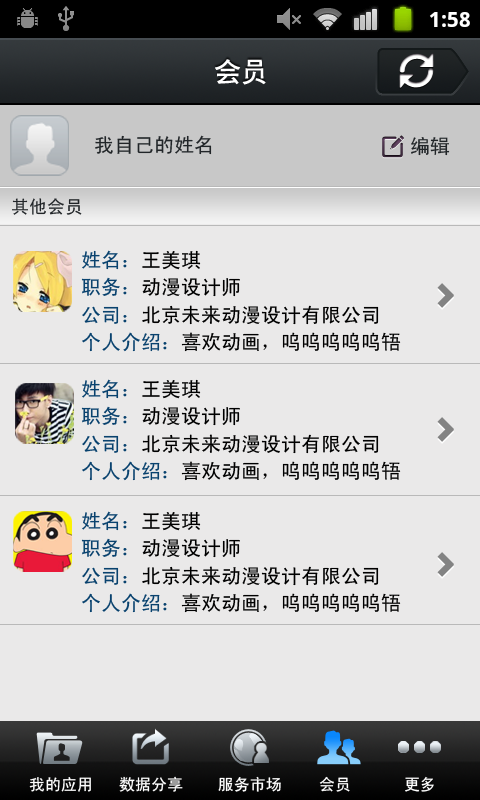
<style>
.page{position:relative;width:480px;height:800px;background:#eae9e9}
.page>*{position:absolute;margin:0}
.t1{font:27px "CTCuHeiSJ";color:#ffffff}
.t2{font:20px "SimHei";color:#212528}
.t3{font:18px "SimHei";color:#212528}
.t4{font:20px "SimHei";color:#09426e}
.t5{font:20px "SimHei";color:#000000}
.t6{font:16px "SimHei";color:#ffffff}
</style>
<div class="page">
<p class="t1" style="left:215px;top:59px;width:51px;height:26px">会员</p>
<p class="t2" style="left:95px;top:135px;width:117px;height:20px">我自己的姓名</p>
<p class="t2" style="left:411px;top:137px;width:39px;height:19px">编辑</p>
<p class="t3" style="left:12px;top:198px;width:70px;height:17px">其他会员</p>
<p class="t4" style="left:82px;top:250px;width:119px;height:20px">姓名：<span class="t5">王美琪</span></p>
<p class="t5" style="left:81px;top:277px;width:159px;height:20px"><span class="t4">职务：</span>动漫设计师</p>
<p class="t5" style="left:82px;top:305px;width:297px;height:20px"><span class="t4">公司：</span>北京未来动漫设计有限公司</p>
<p class="t5" style="left:82px;top:332px;width:319px;height:20px"><span class="t4">个人介绍：</span>喜欢动画，呜呜呜呜呜啎</p>
<p class="t4" style="left:82px;top:379px;width:119px;height:20px">姓名：<span class="t5">王美琪</span></p>
<p class="t5" style="left:81px;top:406px;width:159px;height:20px"><span class="t4">职务：</span>动漫设计师</p>
<p class="t5" style="left:82px;top:434px;width:297px;height:20px"><span class="t4">公司：</span>北京未来动漫设计有限公司</p>
<p class="t5" style="left:82px;top:461px;width:319px;height:20px"><span class="t4">个人介绍：</span>喜欢动画，呜呜呜呜呜啎</p>
<p class="t4" style="left:82px;top:511px;width:119px;height:20px">姓名：<span class="t5">王美琪</span></p>
<p class="t5" style="left:81px;top:538px;width:159px;height:20px"><span class="t4">职务：</span>动漫设计师</p>
<p class="t5" style="left:82px;top:566px;width:297px;height:20px"><span class="t4">公司：</span>北京未来动漫设计有限公司</p>
<p class="t5" style="left:82px;top:593px;width:319px;height:20px"><span class="t4">个人介绍：</span>喜欢动画，呜呜呜呜呜啎</p>
<p class="t6" style="left:29px;top:777px;width:62px;height:15px">我的应用</p>
<p class="t6" style="left:119px;top:776px;width:64px;height:16px">数据分享</p>
<p class="t6" style="left:218px;top:776px;width:63px;height:16px">服务市场</p>
<p class="t6" style="left:319px;top:776px;width:31px;height:16px">会员</p>
<p class="t6" style="left:405px;top:776px;width:29px;height:16px">更多</p>
</div>
